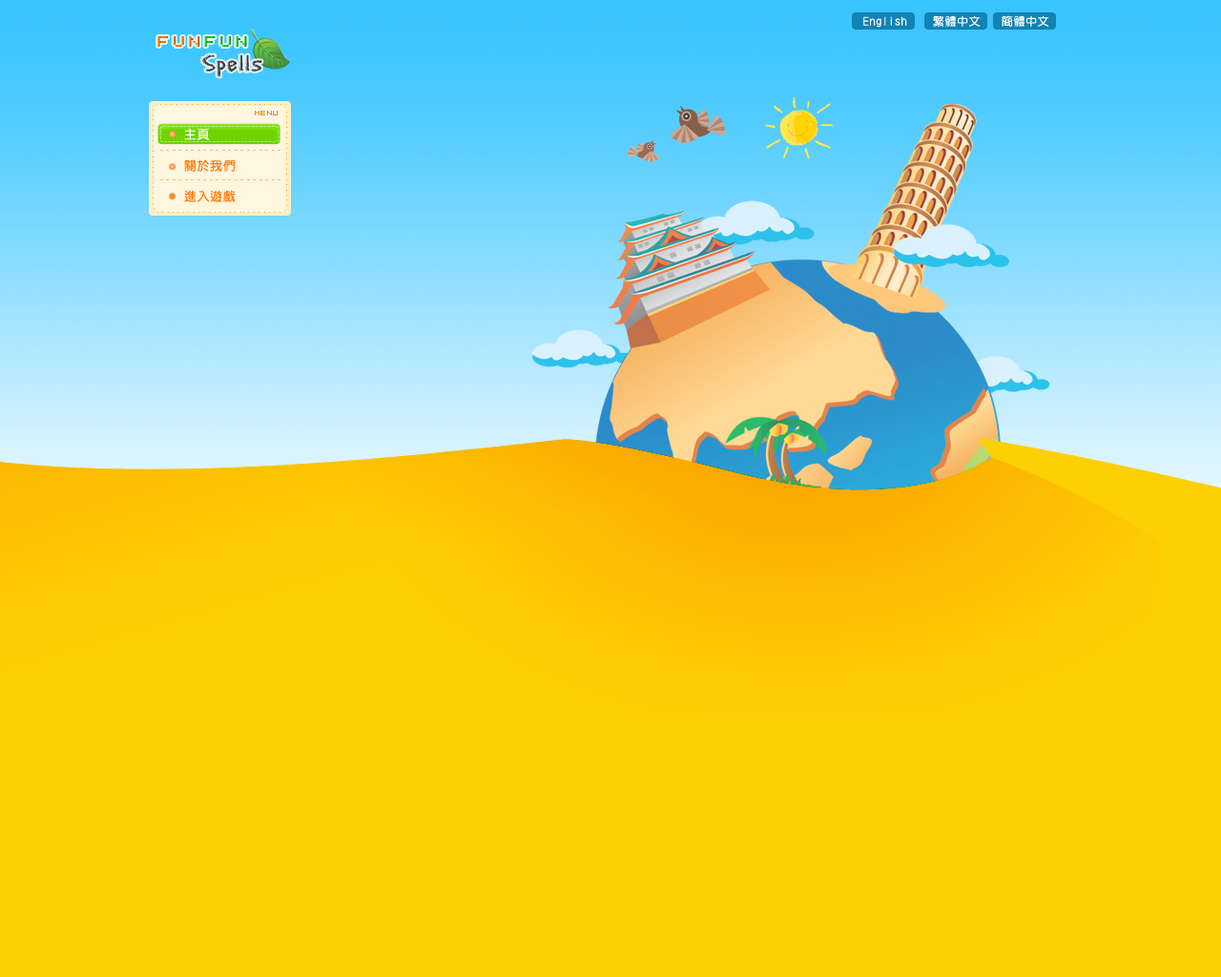
<style>
.page{position:relative;width:1221px;height:977px;background:#fdd003}
.page>*{position:absolute;margin:0}
.t1{font:11.4px "DFYuan-Md-HK-BF";letter-spacing:0.05em;color:#ffffff}
.t2{font:16.5px "FFFIntelligentThinCondensed";letter-spacing:0.2em}
.t3{font:24.8px "EraserDust";letter-spacing:0.02em;color:#404040}
.t4{font:7.6px "04b08";letter-spacing:0.05em;color:#ef8100}
.t5{font:12.4px "DFYuan-Md-HK-BF";letter-spacing:0.05em;color:#ffffff}
.t6{font:5.7px "DFYuan-Md-HK-BF";letter-spacing:0.05em;color:#ffb777}
.t7{font:12.4px "DFYuan-Md-HK-BF";letter-spacing:0.05em;color:#ff7800}
</style>
<div class="page">
<p class="t1" style="left:863px;top:16px;width:44px;height:12px">English</p>
<p class="t1" style="left:933px;top:15px;width:48px;height:13px">繁體中文</p>
<p class="t1" style="left:1002px;top:15px;width:47px;height:12px">簡體中文</p>
<p class="t2" style="left:157px;top:36px;width:90px;height:11px">FunFun</p>
<p class="t3" style="left:201px;top:54px;width:61px;height:23px">Spells</p>
<p class="t4" style="left:255px;top:111px;width:23px;height:4px">MENU</p>
<p class="t5" style="left:184px;top:128px;width:25px;height:12px">主頁</p>
<p class="t6" style="left:160px;top:150px;width:120px;height:1px">_ _ _ _ _ _ _ _ _ _ _ _ _ _ _ _ _ _ _ _ _ _</p>
<p class="t7" style="left:184px;top:159px;width:51px;height:13px">關於我們</p>
<p class="t6" style="left:160px;top:179px;width:120px;height:1px">_ _ _ _ _ _ _ _ _ _ _ _ _ _ _ _ _ _ _ _ _ _</p>
<p class="t7" style="left:184px;top:190px;width:52px;height:12px">進入遊戲</p>
</div>
